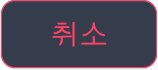
<style>
.page{position:relative;width:158px;height:70px;background:#353c4b}
.page>*{position:absolute;margin:0}
.t1{font:30px "Gulim";letter-spacing:-0.04em;color:#ff4266}
</style>
<div class="page">
<p class="t1" style="left:52px;top:22px;width:55px;height:25px">취소</p>
</div>
